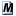
<style>
.page{position:relative;width:16px;height:16px;background:#ffffff}
.page>*{position:absolute;margin:0}
.t1{font:12px "Arial-BoldItalicMT";color:#000000}
</style>
<div class="page">
<p class="t1" style="left:3px;top:2px;width:10px;height:15px">M</p>
</div>
